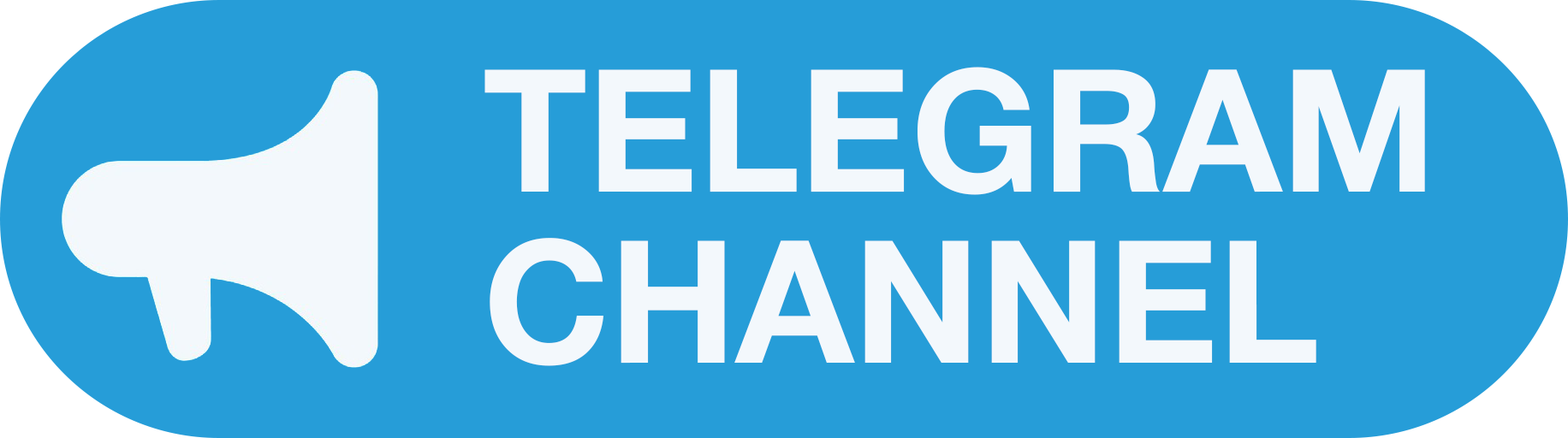
<style>
.page{position:relative;width:1568px;height:438px;background:#269dd8}
.page>*{position:absolute;margin:0}
.t1{font:171.2px/171.2px "HelveticaNeueCyr-Bold";color:#f3f8fc}
</style>
<div class="page">
<p class="t1" style="left:484px;top:67px;width:941px;height:299px">TELEGRAM CHANNEL</p>
</div>
